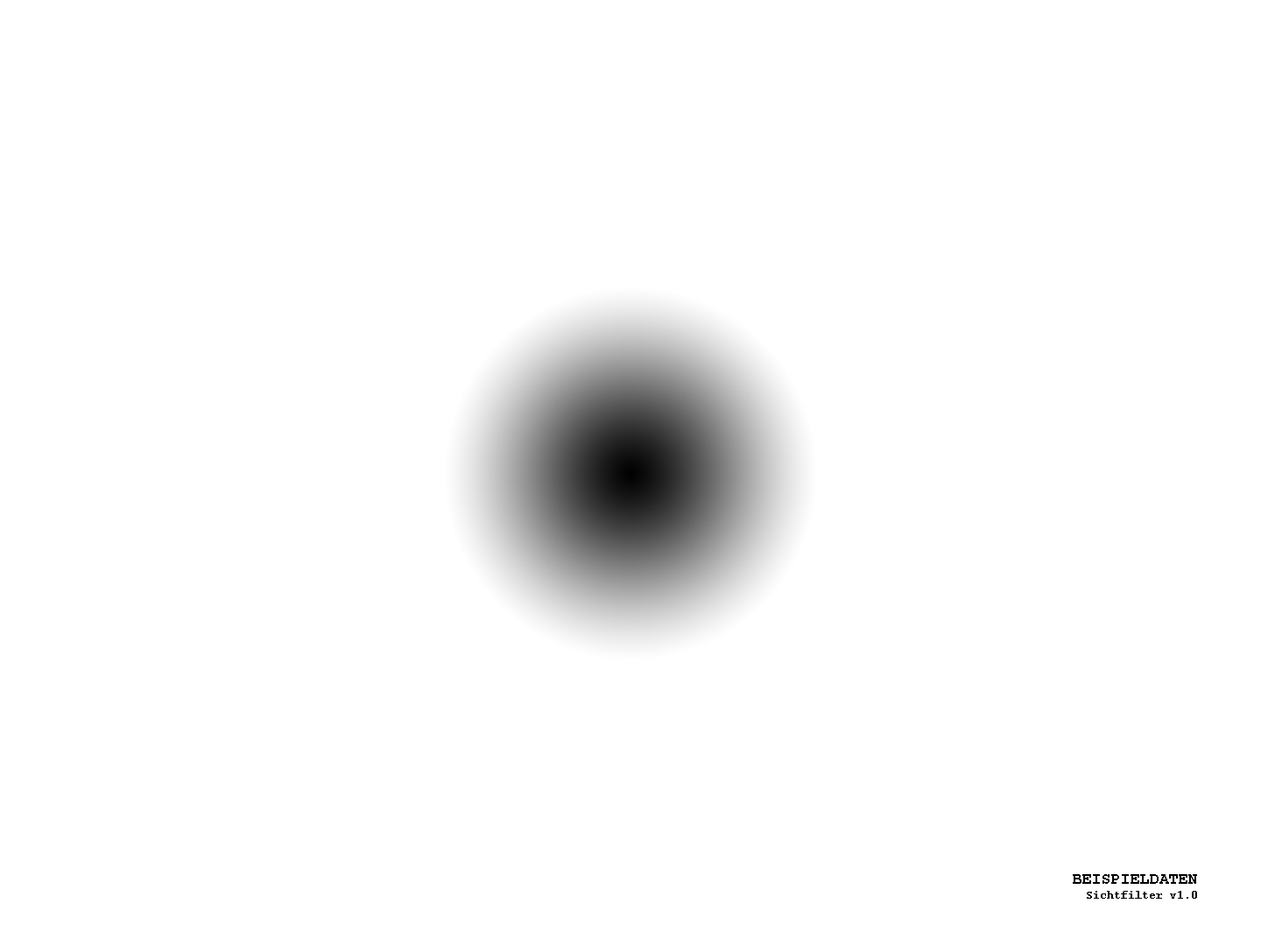
<style>
.page{position:relative;width:1261px;height:946px;background:#ffffff}
.page>*{position:absolute;margin:0}
.t1{font:12.3px "CourierNewPS-BoldMT";color:#000000}
.t2{font:15.8px "CourierNewPS-BoldMT";color:#000000}
</style>
<div class="page">
<p class="t1" style="left:1073px;top:874px;width:124px;height:24px;text-align:right"><span class="t2">BEISPIELDATEN<br></span>Sichtfilter v1.0</p>
</div>
